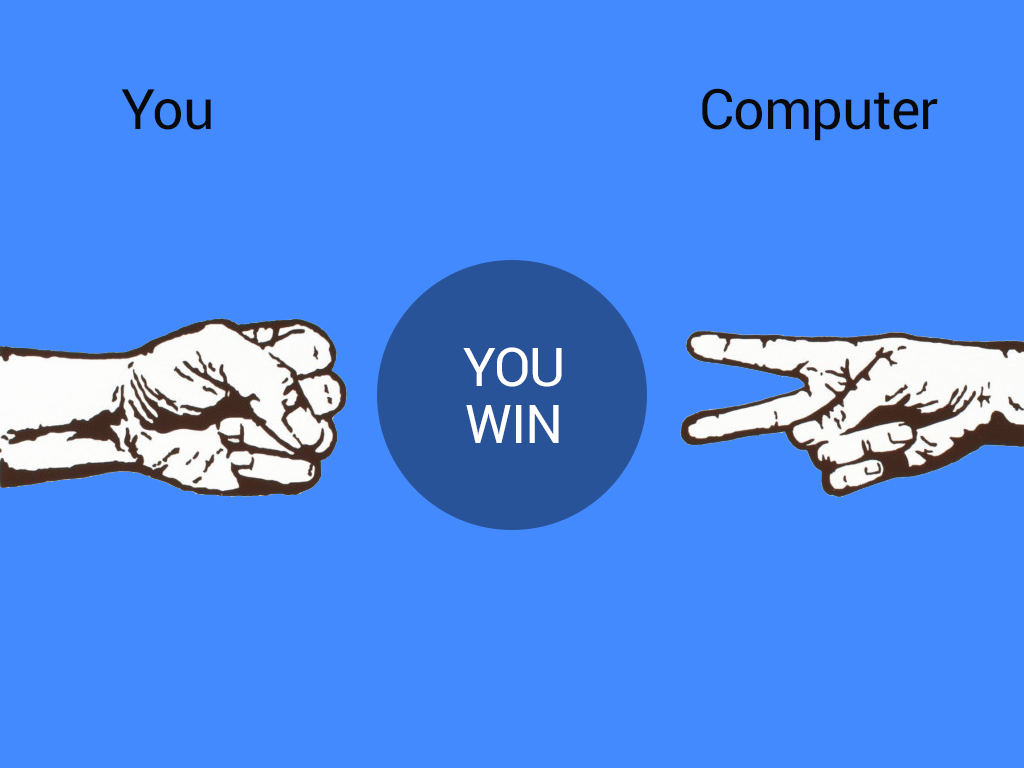
<style>
.page{position:relative;width:1024px;height:768px;background:#448aff}
.page>*{position:absolute;margin:0}
.t1{font:55.8px "Roboto-Regular";letter-spacing:-0.02em;color:#090909}
.t2{font:53.4px/57.5px "Roboto-Regular";letter-spacing:-0.02em;color:#ffffff}
</style>
<div class="page">
<p class="t1" style="left:121px;top:89px;width:90px;height:41px">You</p>
<p class="t1" style="left:702px;top:88px;width:236px;height:53px">Computer</p>
<p class="t2" style="left:463px;top:347px;width:99px;height:96px;text-align:center">YOU<br>WIN</p>
</div>
